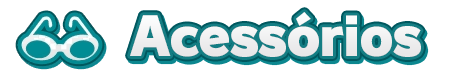
<style>
.page{position:relative;width:458px;height:76px;background:#ffffff}
.page>*{position:absolute;margin:0}
.t1{font:52px "RodinPro-UB";letter-spacing:-0.041em;color:#efefef}
</style>
<div class="page">
<p class="t1" style="left:130px;top:12px;width:291px;height:45px">Acessórios</p>
</div>
